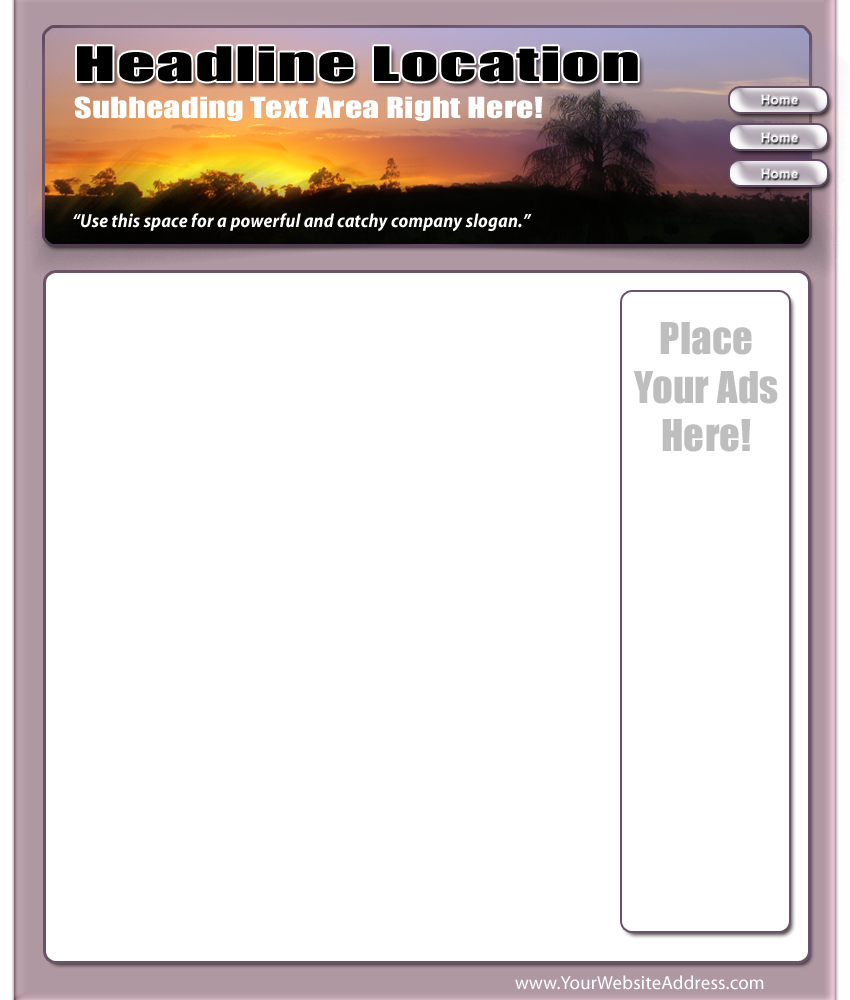
<style>
.page{position:relative;width:850px;height:1000px;background:#ffffff}
.page>*{position:absolute;margin:0}
.t1{font:44px "Impact";letter-spacing:0.01em;color:#000000;scale:1.71 1}
.t2{font:26.8px "Impact";letter-spacing:0.01em;color:#ffffff;scale:1.26 1}
.t3{font:13.5px "Arial-BoldMT";letter-spacing:0.01em}
.t4{font:18.9px "Myriad-BoldItalic";letter-spacing:0.01em;color:#ffffff;scale:0.93 1}
.t5{font:40.4px "Impact";letter-spacing:0.01em;color:#bebebe}
.t6{font:18.9px "Myriad-Roman";letter-spacing:0.01em;color:#ffffff}
</style>
<div class="page">
<p class="t1" style="left:77px;top:46px;width:561px;height:36px">Headline Location</p>
<p class="t2" style="left:74px;top:96px;width:469px;height:25px">Subheading Text Area Right Here!</p>
<p class="t3" style="left:762px;top:95px;width:37px;height:10px">Home</p>
<p class="t3" style="left:762px;top:133px;width:37px;height:10px">Home</p>
<p class="t3" style="left:762px;top:169px;width:37px;height:10px">Home</p>
<p class="t4" style="left:73px;top:213px;width:459px;height:19px">“Use this space for a powerful and catchy company slogan.”</p>
<p class="t5" style="left:633px;top:322px;width:145px;height:130px;text-align:center">Place<br>Your Ads<br>Here!</p>
<p class="t6" style="left:515px;top:975px;width:249px;height:15px">www.YourWebsiteAddress.com</p>
</div>
